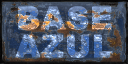
<style>
.page{position:relative;width:128px;height:64px}
.page>*{position:absolute;margin:0}
.t1{font:30.7px/28px "Arial-Black";letter-spacing:0.025em;text-transform:uppercase;font-weight:bold}
</style>
<div class="page">
<p class="t1" style="left:15px;top:6px;width:98px;height:52px;text-align:center">BASE<br>AZUL</p>
</div>
